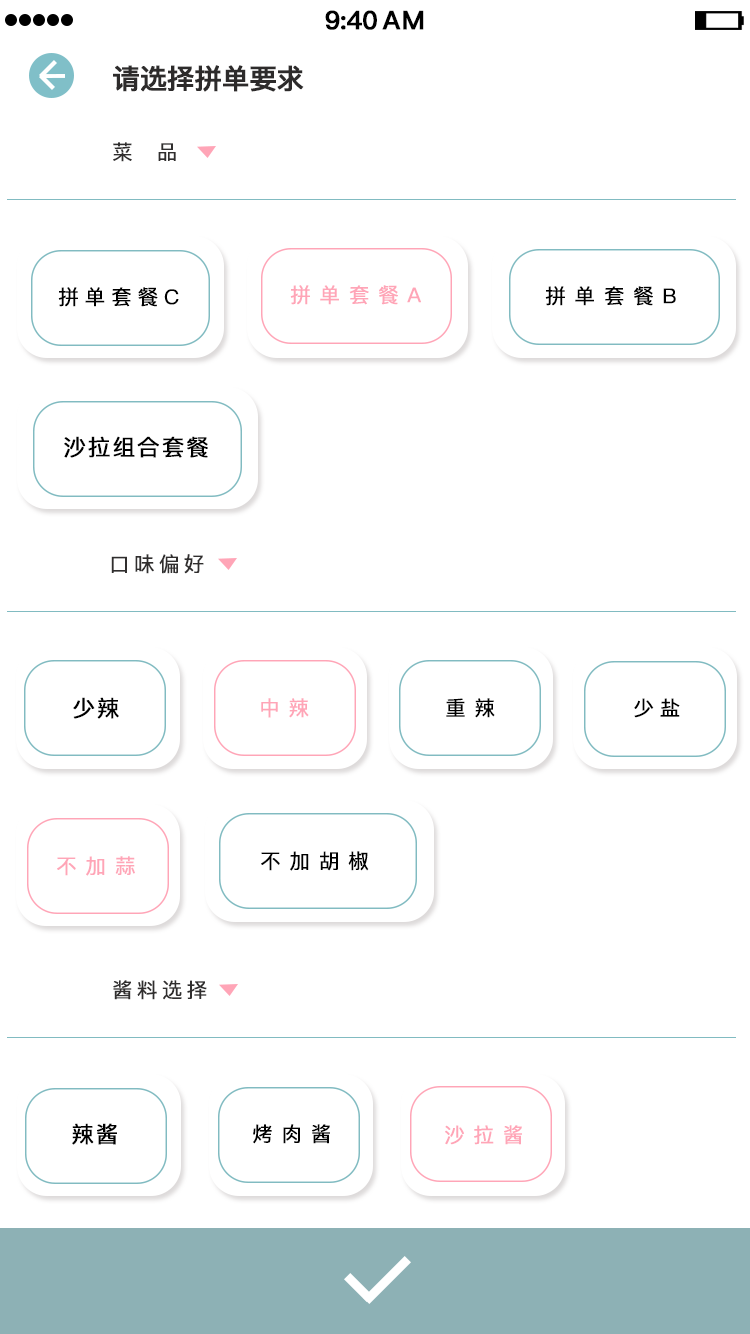
<style>
.page{position:relative;width:750px;height:1334px;background:#ffffff}
.page>*{position:absolute;margin:0}
.t1{font:25.4px "PingFang-SC-Bold";letter-spacing:-0.028em;color:#000000;font-weight:bold}
.t2{font:25.4px "PingFang-SC-Bold";letter-spacing:0.052em;color:#000000;font-weight:bold}
.t3{font:27.4px "PingFang-SC-Bold";letter-spacing:-0.028em;color:#2d2b2b;font-weight:bold}
.t4{font:20.4px "PingFang-SC-Medium";letter-spacing:1.172em;color:#302e2e;font-weight:bold}
.t5{font:20.4px "PingFang-SC-Medium";letter-spacing:0.272em;color:#000000;font-weight:bold}
.t6{font:20.4px "PingFang-SC-Medium";letter-spacing:0.412em;color:#ffa5b7;font-weight:bold}
.t7{font:20.4px "PingFang-SC-Medium";letter-spacing:0.412em;color:#000000;font-weight:bold}
.t8{font:22.4px "PingFang-SC-Medium";letter-spacing:0.072em;color:#000000;font-weight:bold}
.t9{font:20.4px "PingFang-SC-Medium";letter-spacing:0.192em;color:#302e2e;font-weight:bold}
</style>
<div class="page">
<p class="t1" style="left:325px;top:10px;width:52px;height:20px">9:40</p>
<p class="t2" style="left:382px;top:10px;width:42px;height:20px">AM</p>
<p class="t3" style="left:113px;top:65px;width:191px;height:27px">请选择拼单要求</p>
<p class="t4" style="left:113px;top:142px;width:63px;height:20px">菜品</p>
<p class="t5" style="left:58px;top:287px;width:121px;height:20px">拼单套餐C</p>
<p class="t6" style="left:290px;top:285px;width:131px;height:20px">拼单套餐A</p>
<p class="t7" style="left:545px;top:286px;width:131px;height:20px">拼单套餐B</p>
<p class="t8" style="left:64px;top:436px;width:144px;height:22px">沙拉组合套餐</p>
<p class="t9" style="left:111px;top:554px;width:93px;height:20px">口味偏好</p>
<p class="t8" style="left:73px;top:697px;width:46px;height:22px">少辣</p>
<p class="t6" style="left:261px;top:698px;width:48px;height:20px">中辣</p>
<p class="t7" style="left:446px;top:698px;width:49px;height:20px">重辣</p>
<p class="t5" style="left:634px;top:698px;width:46px;height:20px">少盐</p>
<p class="t6" style="left:57px;top:856px;width:78px;height:20px">不加蒜</p>
<p class="t7" style="left:261px;top:851px;width:108px;height:20px">不加胡椒</p>
<p class="t9" style="left:113px;top:980px;width:94px;height:20px">酱料选择</p>
<p class="t8" style="left:72px;top:1123px;width:45px;height:22px">辣酱</p>
<p class="t7" style="left:253px;top:1124px;width:77px;height:20px">烤肉酱</p>
<p class="t6" style="left:445px;top:1125px;width:77px;height:20px">沙拉酱</p>
</div>
